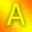
<style>
.page{position:relative;width:32px;height:32px}
.page>*{position:absolute;margin:0}
.t1{font:30px "Tahoma";color:#fcf300}
</style>
<div class="page">
<p class="t1" style="left:6px;top:3px;width:20px;height:22px">А</p>
</div>
